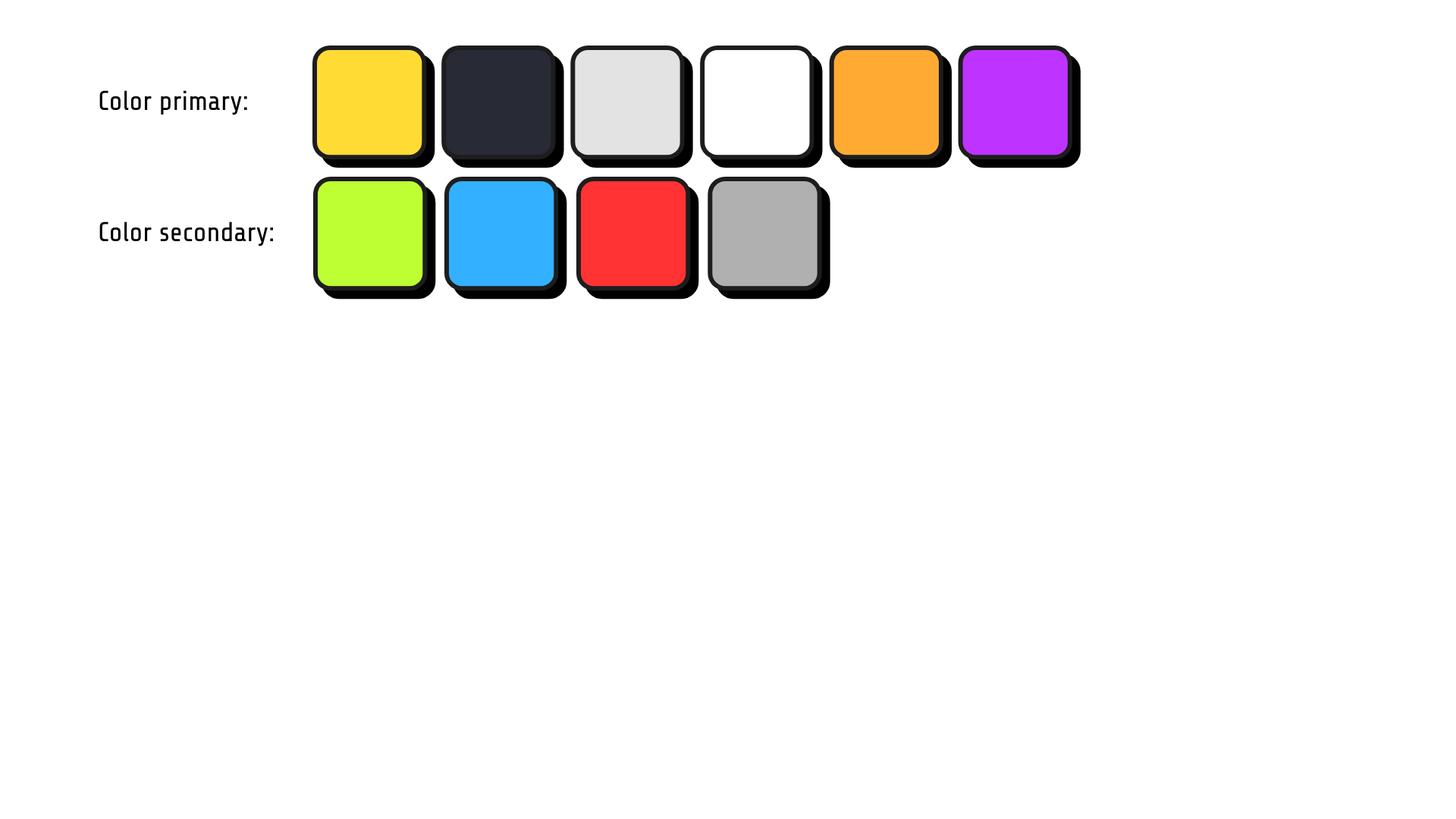
<style>
.page{position:relative;width:1456px;height:819px;background:#ffffff}
.page>*{position:absolute;margin:0}
.t1{font:27.3px "Share-Tech";color:#000000}
</style>
<div class="page">
<p class="t1" style="left:99px;top:90px;width:148px;height:25px">Color primary:</p>
<p class="t1" style="left:99px;top:221px;width:174px;height:25px">Color secondary:</p>
</div>
